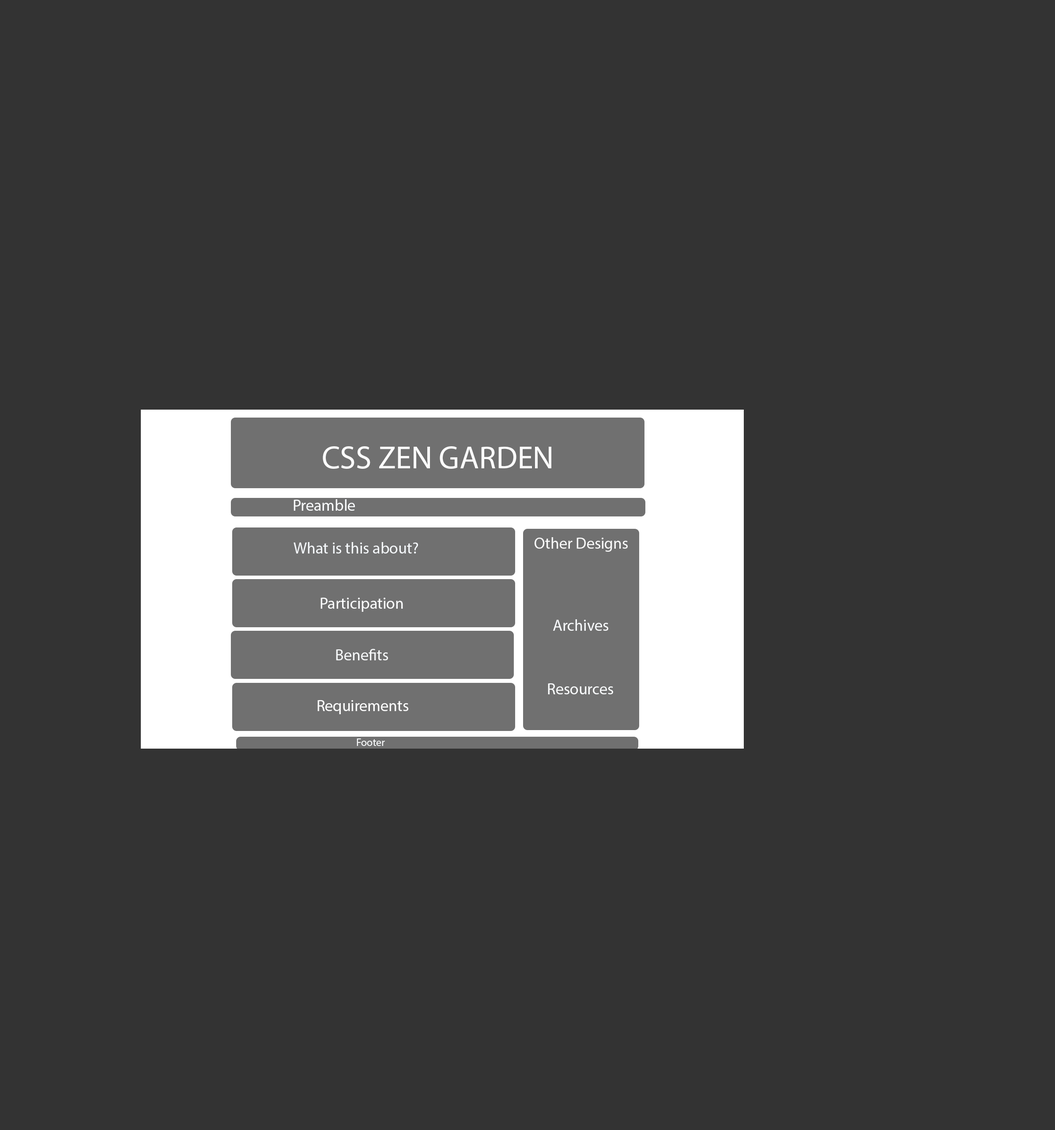
<style>
.page{position:relative;width:1055px;height:1130px;background:#333333}
.page>*{position:absolute;margin:0}
.t1{font:31.8px "MyriadPro-Regular";color:#fcfcfc}
.t2{font:15.9px "MyriadPro-Regular";color:#fafcfe}
.t3{font:15.9px "MyriadPro-Regular";color:#f4f7fa}
.t4{font:15.9px "MyriadPro-Regular";color:#fafafa}
.t5{font:15.9px "MyriadPro-Regular";color:#fdfeff}
.t6{font:15.9px "MyriadPro-Regular";color:#f8fafc}
.t7{font:15.9px "MyriadPro-Regular";color:#f6f8f9}
.t8{font:15.9px "MyriadPro-Regular";color:#fafcfd}
.t9{font:15.9px "MyriadPro-Regular";color:#ffffff}
.t10{font:10.6px "MyriadPro-Regular";color:#f9fbfc}
</style>
<div class="page">
<p class="t1" style="left:323px;top:446px;width:228px;height:23px">CSS ZEN GARDEN</p>
<p class="t2" style="left:294px;top:499px;width:61px;height:12px">Preamble</p>
<p class="t3" style="left:294px;top:542px;width:124px;height:12px">What is this about?</p>
<p class="t4" style="left:535px;top:537px;width:93px;height:15px">Other Designs</p>
<p class="t5" style="left:321px;top:598px;width:82px;height:14px">Participation</p>
<p class="t6" style="left:553px;top:619px;width:55px;height:12px">Archives</p>
<p class="t7" style="left:336px;top:649px;width:52px;height:11px">Benefits</p>
<p class="t8" style="left:548px;top:683px;width:65px;height:11px">Resources</p>
<p class="t9" style="left:317px;top:700px;width:91px;height:14px">Requirements</p>
<p class="t10" style="left:357px;top:739px;width:28px;height:7px">Footer</p>
</div>
